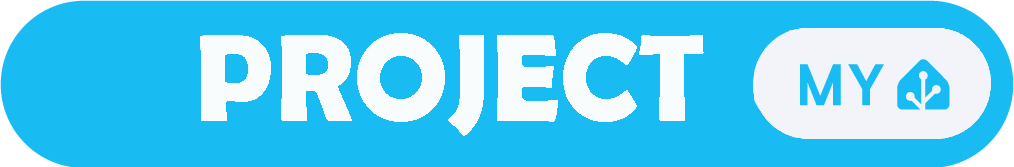
<style>
.page{position:relative;width:1014px;height:167px;background:#18bcf2}
.page>*{position:absolute;margin:0}
.t1{font:125px "BerlinSansFBDemi-Bold";color:#f9fcfd}
</style>
<div class="page">
<p class="t1" style="left:200px;top:33px;width:504px;height:103px">PROJECT</p>
</div>
